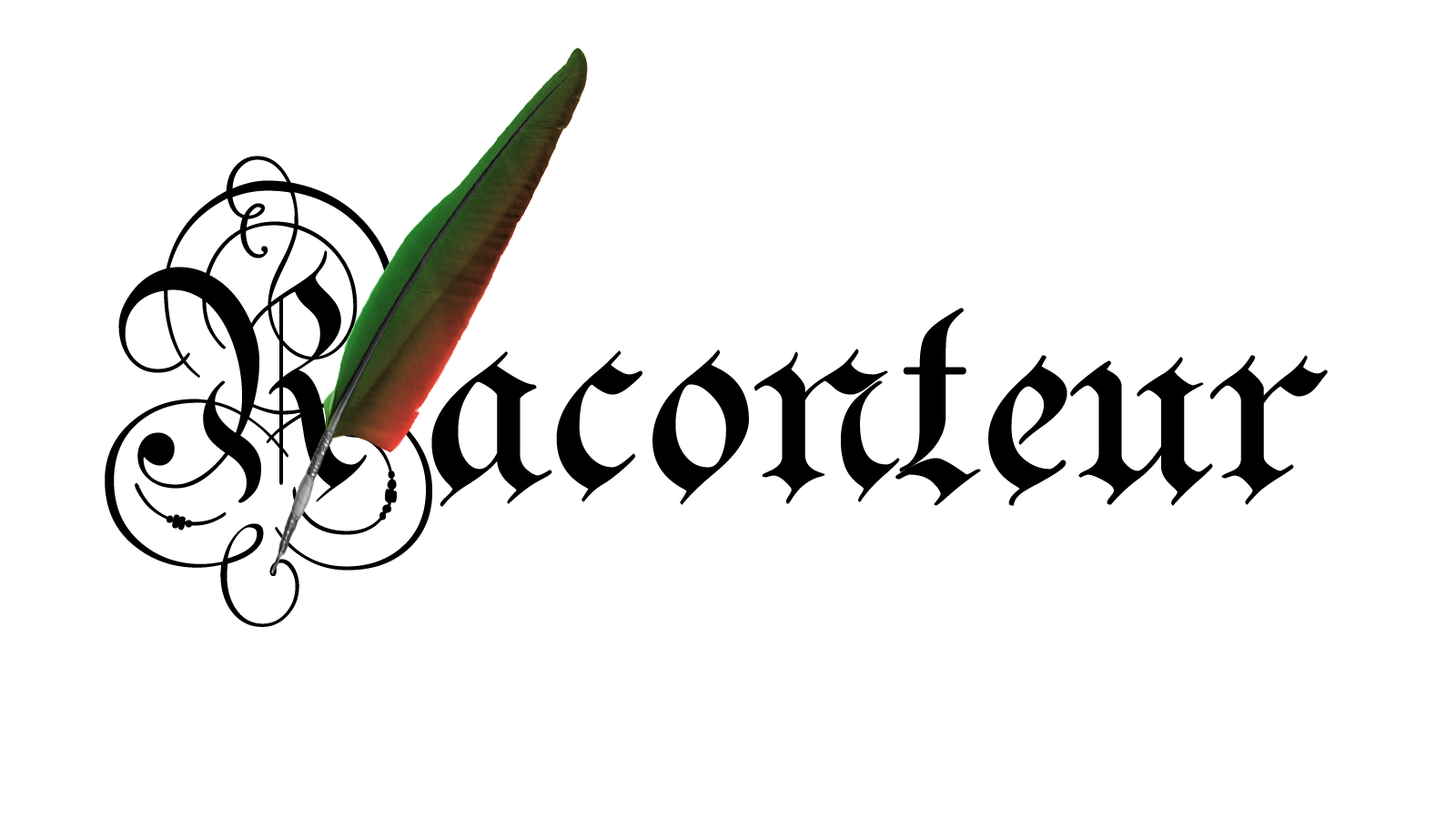
<style>
.page{position:relative;width:1456px;height:819px;background:#ffffff}
.page>*{position:absolute;margin:0}
.t1{font:510.2px "Parchment-Regular";letter-spacing:-0.025em;color:#000000;font-weight:bold;scale:1.15 1}
.t2{font:510.2px "Parchment-Regular";letter-spacing:-0.025em;color:#000000;font-weight:bold;scale:0.86 1}
</style>
<div class="page">
<p class="t1" style="left:105px;top:156px;width:1223px;height:471px"><span class="t2">R</span>aconteur</p>
</div>
